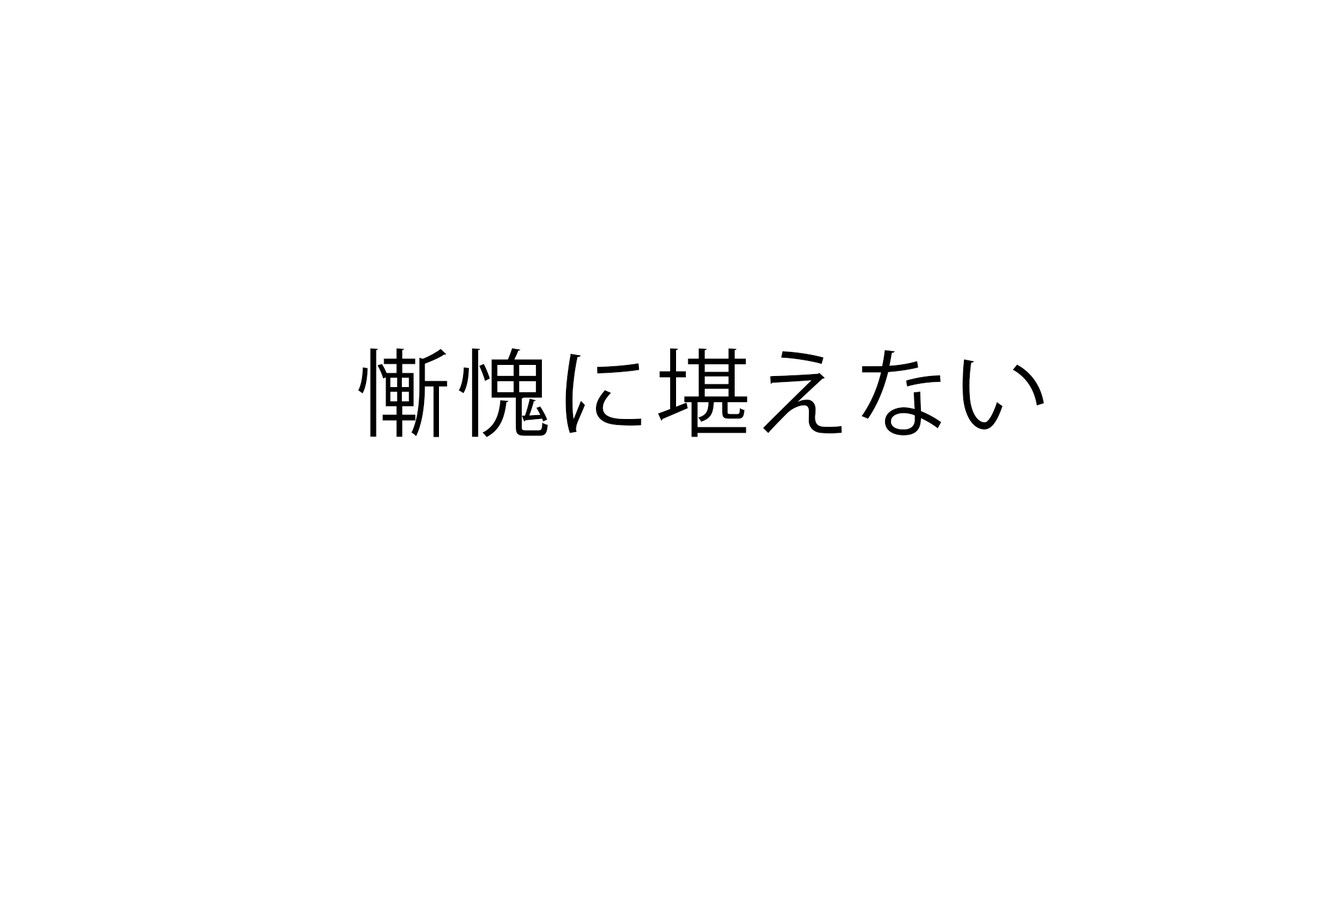
<style>
.page{position:relative;width:1328px;height:898px;background:#ffffff}
.page>*{position:absolute;margin:0}
.t1{font:95px "KozGoPr6N-Regular";letter-spacing:0.05em;color:#000000}
</style>
<div class="page">
<p class="t1" style="left:358px;top:348px;width:686px;height:89px">慚愧に堪えない</p>
</div>
